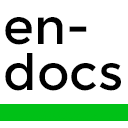
<style>
.page{position:relative;width:128px;height:128px;background:#ffffff}
.page>*{position:absolute;margin:0}
.t1{font:50px/46px "Montserrat-Regular";color:#000000}
</style>
<div class="page">
<p class="t1" style="left:5px;top:17px;width:116px;height:74px">en-<br>docs</p>
</div>
